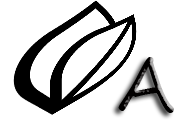
<style>
.page{position:relative;width:180px;height:120px;background:#ffffff}
.page>*{position:absolute;margin:0}
.t1{font:72px "SegoePrint";color:#030000}
</style>
<div class="page">
<p class="t1" style="left:118px;top:57px;width:56px;height:56px">A</p>
</div>
